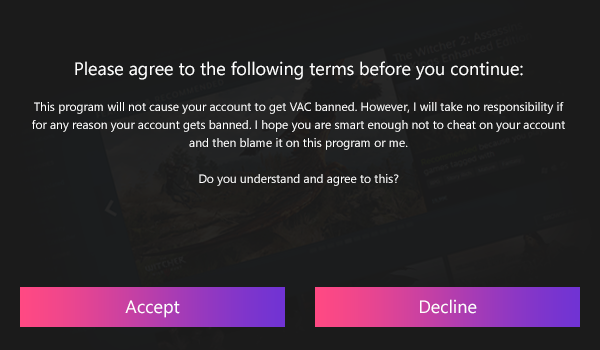
<style>
.page{position:relative;width:600px;height:350px;background:#1b1b1b}
.page>*{position:absolute;margin:0}
.t1{font:12px/18px "SegoeUI";color:#ffffff}
.t2{font:18px/18px "SegoeUI";color:#ffffff}
.t3{font:18px "SegoeUI";color:#ffffff}
</style>
<div class="page">
<p class="t1" style="left:32px;top:61px;width:533px;height:125px;text-align:center"><span class="t2">Please agree to the following terms before you continue:<br><br></span>This program will not cause your account to get VAC banned. However, I will take no responsibility if for any reason your account gets banned. I hope you are smart enough not to cheat on your account and then blame it on this program or me.<br><br>Do you understand and agree to this?</p>
<p class="t3" style="left:125px;top:300px;width:55px;height:18px">Accept</p>
<p class="t3" style="left:420px;top:299px;width:57px;height:15px">Decline</p>
</div>
